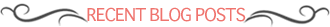
<style>
.page{position:relative;width:330px;height:27px;background:#ffffff}
.page>*{position:absolute;margin:0}
.t1{font:17px "Thonburi";letter-spacing:-0.045em;color:#ef746e}
</style>
<div class="page">
<p class="t1" style="left:87px;top:7px;width:159px;height:15px">RECENT BLOG POSTS</p>
</div>
